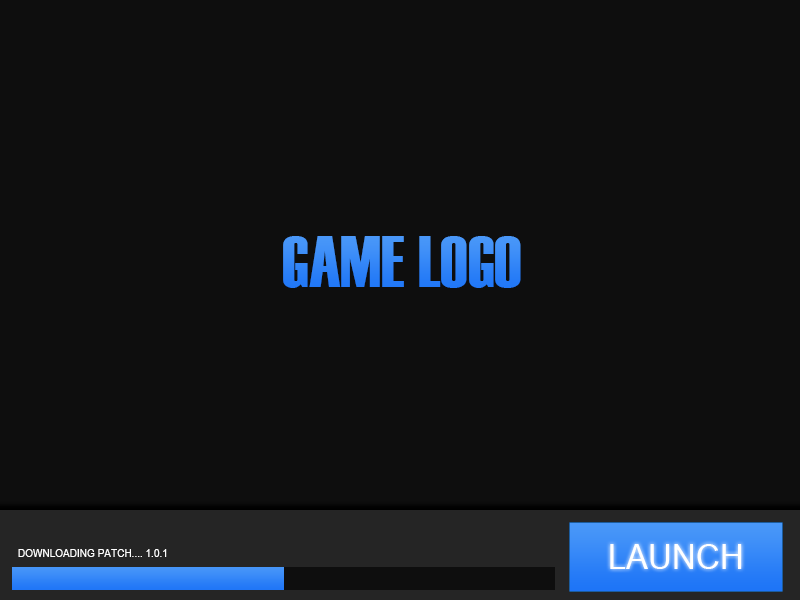
<style>
.page{position:relative;width:800px;height:600px;background:#0e0e0e}
.page>*{position:absolute;margin:0}
.t1{font:72px "Haettenschweiler";color:#3587f7}
.t2{font:46.6px "Utsaah";color:#ffffff}
.t3{font:14px "Utsaah";color:#ffffff}
</style>
<div class="page">
<p class="t1" style="left:283px;top:236px;width:238px;height:52px">GAME LOGO</p>
<p class="t2" style="left:610px;top:544px;width:132px;height:25px">LAUNCH</p>
<p class="t3" style="left:18px;top:549px;width:149px;height:8px">DOWNLOADING PATCH.... 1.0.1</p>
</div>
